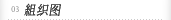
<style>
.page{position:relative;width:171px;height:20px;background:#ffffff}
.page>*{position:absolute;margin:0}
.t1{font:14px "Haansoft-Batang";color:#333333;font-weight:bold;font-style:italic;scale:0.85 1}
</style>
<div class="page">
<p class="t1" style="left:24px;top:3px;width:37px;height:13px">組织图</p>
</div>
